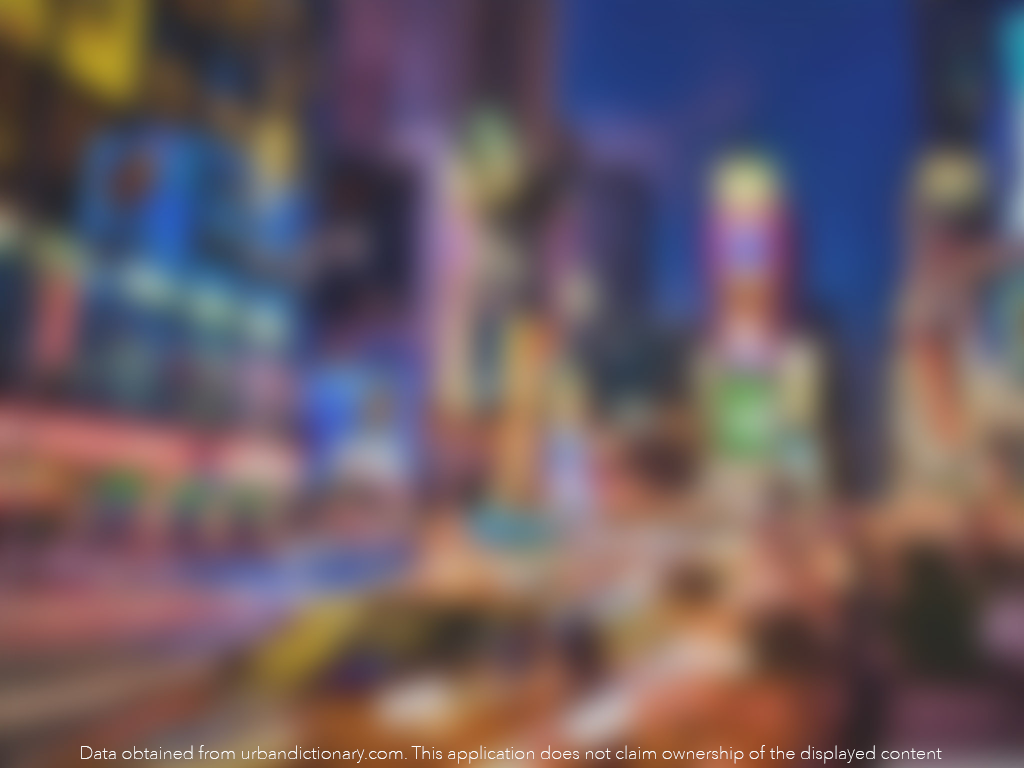
<style>
.page{position:relative;width:1024px;height:768px}
.page>*{position:absolute;margin:0}
.t1{font:18px "AvenirNext-UltraLight";color:#fcfcfc}
</style>
<div class="page">
<p class="t1" style="left:81px;top:745px;width:861px;height:19px">Data obtained from urbandictionary.com. This application does not claim ownership of the displayed content</p>
</div>
